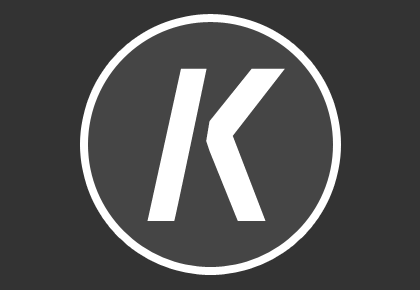
<style>
.page{position:relative;width:420px;height:290px;background:#333333}
.page>*{position:absolute;margin:0}
.t1{font:233.6px "Postmaster";letter-spacing:-0.02em;color:#ffffff}
</style>
<div class="page">
<p class="t1" style="left:147px;top:68px;width:138px;height:153px">K</p>
</div>
